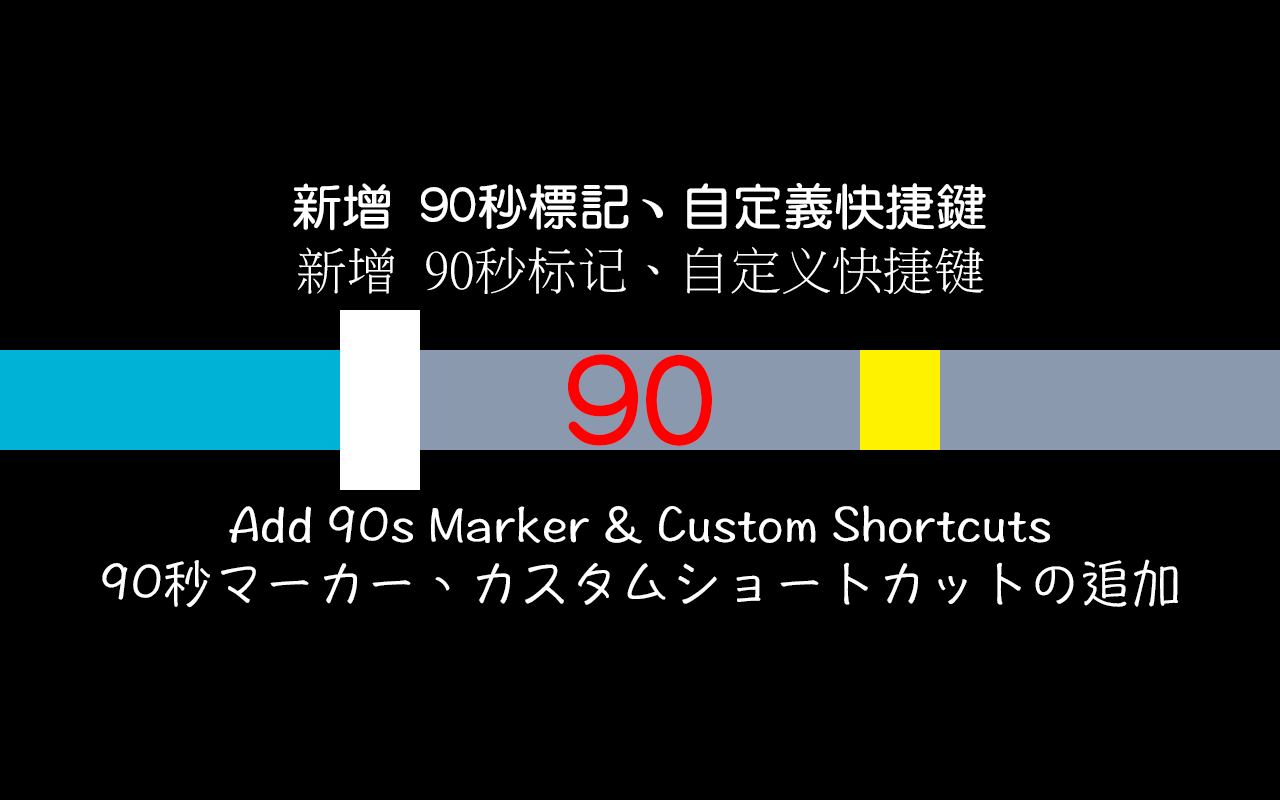
<style>
.page{position:relative;width:1280px;height:800px;background:#000000}
.page>*{position:absolute;margin:0}
.t1{font:51px "©M¥­²Ê¶ê";color:#ffffff}
.t2{font:51px "MingLiU";color:#ffffff}
.t3{font:133.3px "©M¥­²Ê¶ê";color:#ff0000}
.t4{font:51px "DFPHannotateW5-B5-TW";color:#ffffff}
</style>
<div class="page">
<p class="t1" style="left:293px;top:183px;width:693px;height:48px">新增 90秒標記、自定義快捷鍵</p>
<p class="t2" style="left:297px;top:247px;width:687px;height:47px">新增 90秒标记、自定义快捷键</p>
<p class="t3" style="left:567px;top:354px;width:146px;height:92px">90</p>
<p class="t4" style="left:229px;top:505px;width:821px;height:39px">Add 90s Marker &amp; Custom Shortcuts</p>
<p class="t4" style="left:102px;top:559px;width:1076px;height:49px">90秒マーカー、カスタムショートカットの追加</p>
</div>
